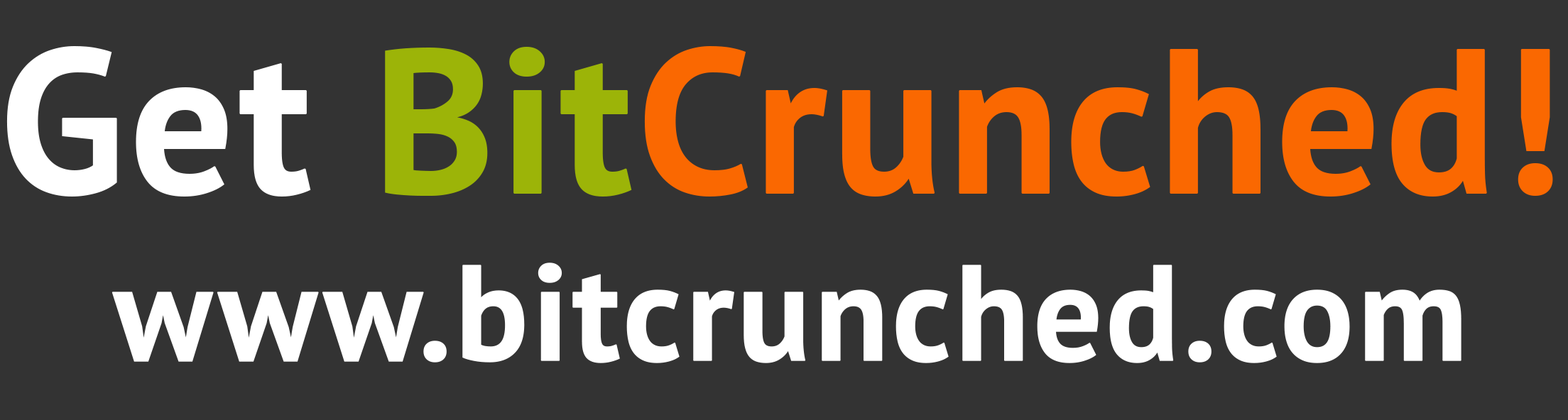
<style>
.page{position:relative;width:1568px;height:420px;background:#333333}
.page>*{position:absolute;margin:0}
.t1{font:204.5px "PTSans-Bold";color:#fa6801;font-weight:bold}
.t2{font:204.5px "PTSans-Bold";color:#ffffff;font-weight:bold}
.t3{font:204.5px "PTSans-Bold";color:#9cb408;font-weight:bold}
.t4{font:136.3px "PTSans-Bold";color:#ffffff;font-weight:bold}
</style>
<div class="page">
<p class="t1" style="left:6px;top:46px;width:1547px;height:151px"><span class="t2">Get </span><span class="t3">Bit</span>Crunched!</p>
<p class="t4" style="left:111px;top:263px;width:1350px;height:101px">www.bitcrunched.com</p>
</div>
